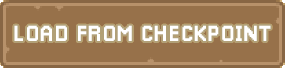
<style>
.page{position:relative;width:285px;height:68px;background:#97714a}
.page>*{position:absolute;margin:0}
.t1{font:22px "Pixellari";color:#ffffff}
</style>
<div class="page">
<p class="t1" style="left:14px;top:25px;width:257px;height:16px">LOAD FROM CHECKPOINT</p>
<p class="t1" style="left:14px;top:25px;width:257px;height:16px">LOAD FROM CHECKPOINT</p>
</div>
